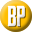
<style>
.page{position:relative;width:32px;height:32px;background:#ffffff}
.page>*{position:absolute;margin:0}
.t1{font:29px "Moonshiner-Regular";color:#ffffff}
</style>
<div class="page">
<p class="t1" style="left:7px;top:5px;width:18px;height:22px">BP</p>
</div>
